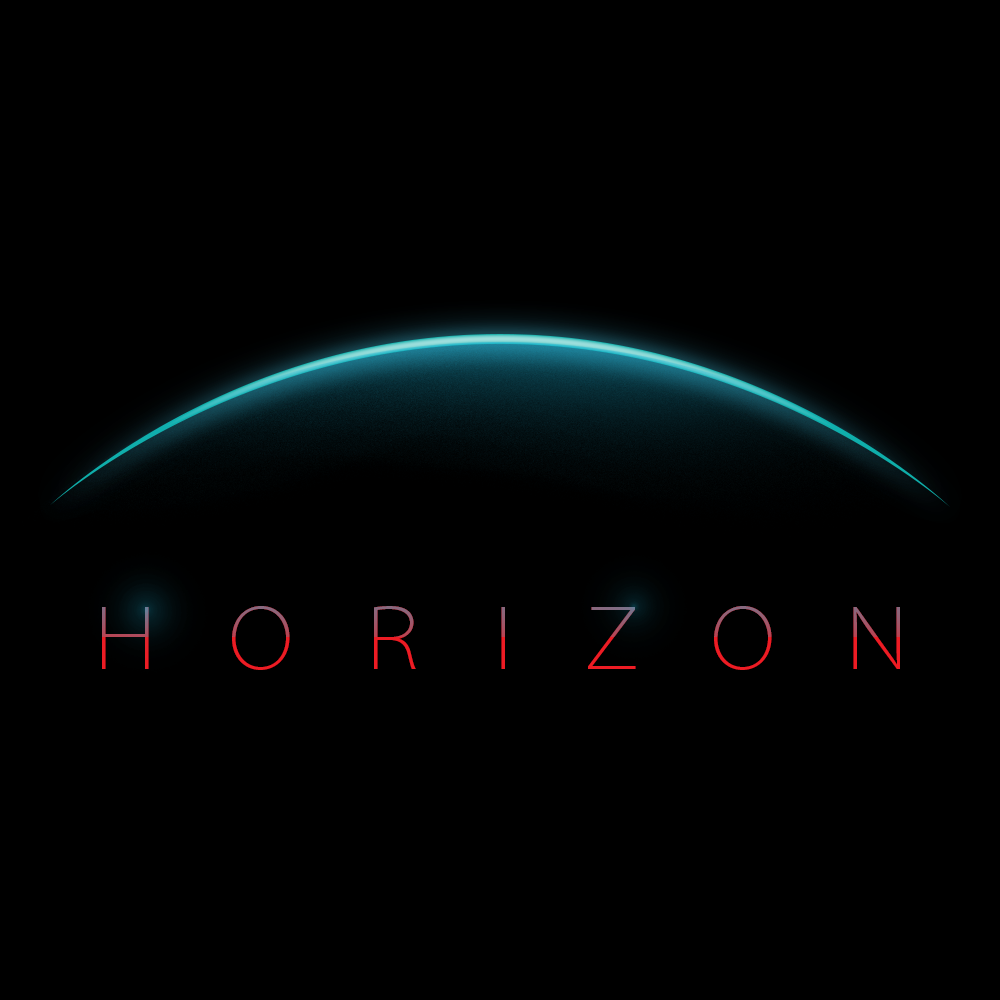
<style>
.page{position:relative;width:1000px;height:1000px;background:#000000}
.page>*{position:absolute;margin:0}
.t1{font:88px "MyriadCAD";text-transform:uppercase}
</style>
<div class="page">
<p class="t1" style="left:102px;top:606px;width:798px;height:64px">horizon</p>
</div>
